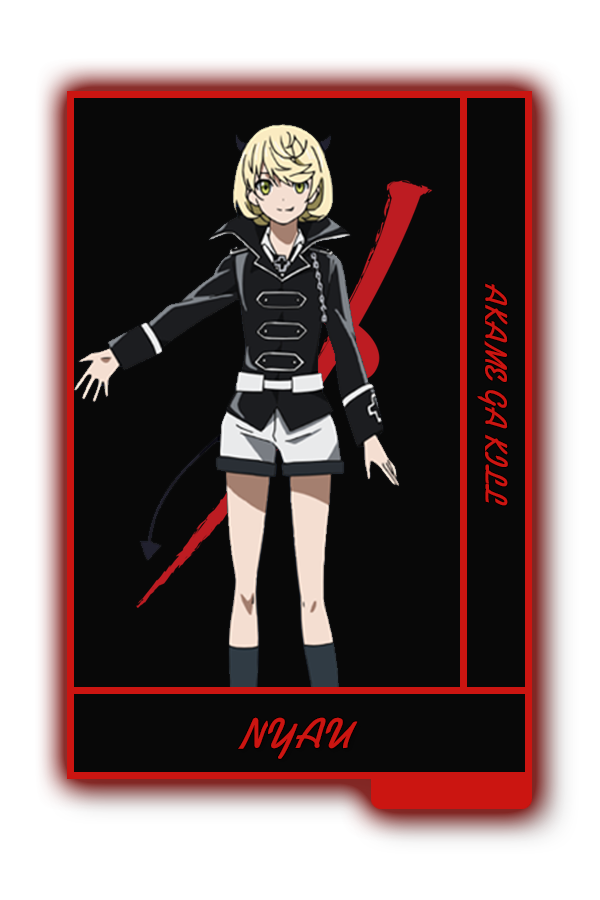
<style>
.page{position:relative;width:600px;height:900px;background:#080808}
.page>*{position:absolute;margin:0}
.t1{font:31.2px "Alako-Bold";color:#cb1511}
.t2{font:43.2px "Alako-Bold";color:#cb1511}
</style>
<div class="page">
<p class="t1" style="left:477px;top:283px;width:31px;height:223px;rotate:90deg">AKAME GA KILL</p>
<p class="t2" style="left:238px;top:717px;width:120px;height:42px">NYAU</p>
</div>
